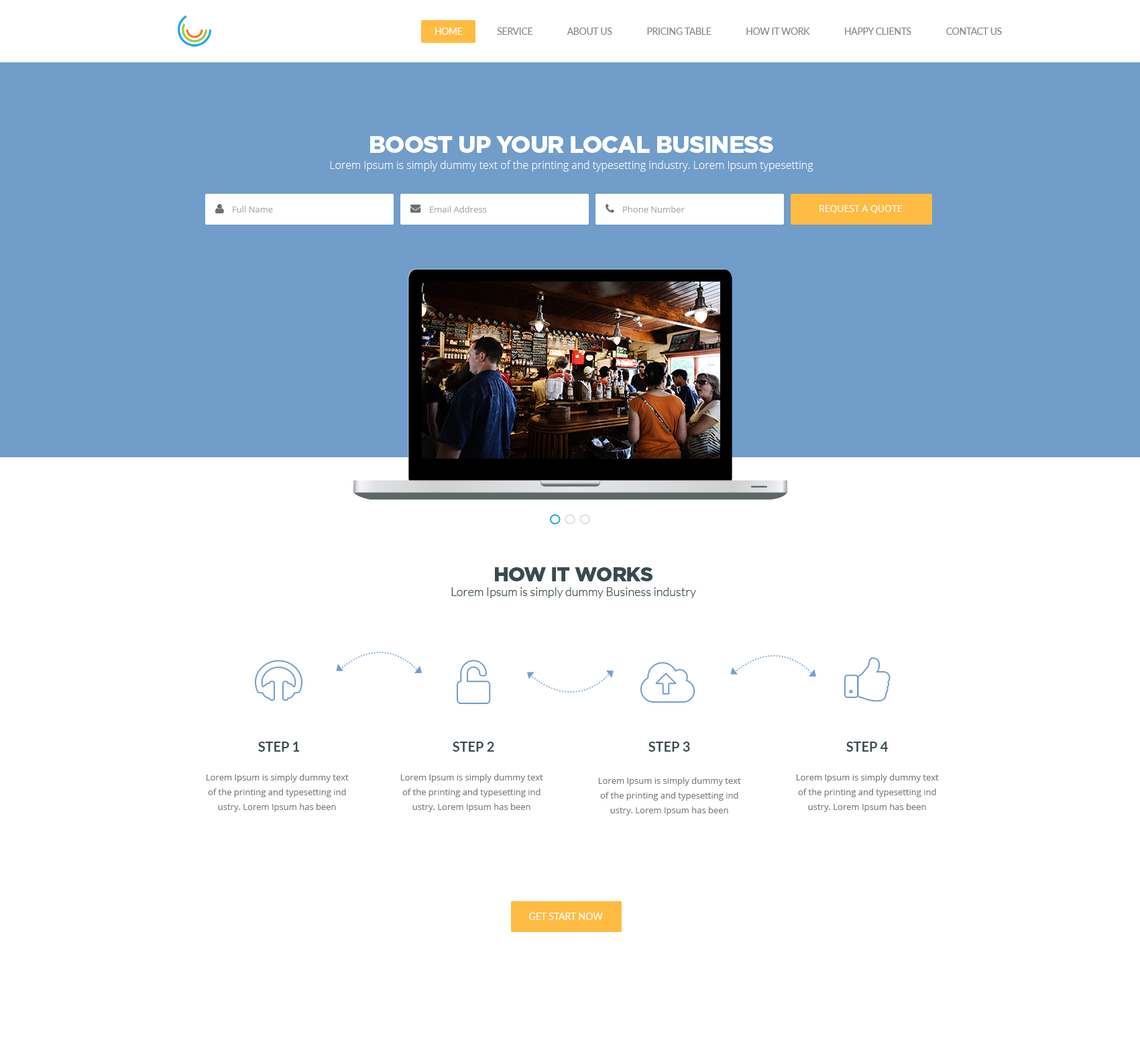
<style>
.page{position:relative;width:1140px;height:1046px;background:#ffffff}
.page>*{position:absolute;margin:0}
.t1{font:9.1px "Lato-Regular";color:#868686;text-transform:uppercase}
.t2{font:9.1px "Lato-Regular";color:#ffffff;text-transform:uppercase}
.t3{font:10.7px/16.1px "OpenSans-Light";color:#ffffff}
.t4{font:23.5px/16.1px "Gotham-Black";letter-spacing:-0.025em;color:#ffffff;text-transform:uppercase}
.t5{font:8.7px "OpenSans";color:#a9a9a9}
.t6{font:9.4px "OpenSans";color:#ffffff;text-transform:uppercase}
.t7{font:12.1px/14.8px "Lato-Light";color:#394b50}
.t8{font:20.1px/14.8px "Gotham-Black";letter-spacing:-0.025em;color:#394b50;text-transform:uppercase}
.t9{font:13.4px "Lato-Bold";color:#394b50;text-transform:uppercase}
.t10{font:8.7px/14.8px "OpenSans";color:#7b7b7b}
.t11{font:9.4px "Lato-Regular";color:#ffffff;text-transform:uppercase}
</style>
<div class="page">
<p class="t1" style="left:435px;top:27px;width:567px;height:8px"><span class="t2">Home  </span>             Service               About us               Pricing Table               How it work               Happy Clients               Contact Us</p>
<p class="t3" style="left:330px;top:136px;width:483px;height:36px;text-align:center"><span class="t4">Boost up your Local business<br></span>Lorem Ipsum is simply dummy text of the printing and typesetting industry. Lorem Ipsum typesetting</p>
<p class="t5" style="left:233px;top:206px;width:40px;height:7px">Full Name</p>
<p class="t5" style="left:430px;top:206px;width:57px;height:7px">Email Address</p>
<p class="t5" style="left:623px;top:206px;width:62px;height:7px">Phone Number</p>
<p class="t6" style="left:819px;top:205px;width:83px;height:8px">Request a quote</p>
<p class="t7" style="left:451px;top:567px;width:245px;height:31px;text-align:center"><span class="t8">How it works<br></span>Lorem Ipsum is simply dummy Business industry</p>
<p class="t9" style="left:258px;top:742px;width:42px;height:10px">Step 1</p>
<p class="t9" style="left:453px;top:742px;width:41px;height:10px">Step 2</p>
<p class="t9" style="left:648px;top:742px;width:42px;height:10px">Step 3</p>
<p class="t9" style="left:846px;top:742px;width:42px;height:10px">Step 4</p>
<p class="t10" style="left:206px;top:774px;width:143px;height:38px;text-align:center">Lorem Ipsum is simply dummy text of the printing and typesetting ind<br>ustry. Lorem Ipsum has been</p>
<p class="t10" style="left:400px;top:774px;width:143px;height:38px;text-align:center">Lorem Ipsum is simply dummy text of the printing and typesetting ind<br>ustry. Lorem Ipsum has been</p>
<p class="t10" style="left:796px;top:774px;width:143px;height:38px;text-align:center">Lorem Ipsum is simply dummy text of the printing and typesetting ind<br>ustry. Lorem Ipsum has been</p>
<p class="t10" style="left:598px;top:777px;width:143px;height:38px;text-align:center">Lorem Ipsum is simply dummy text of the printing and typesetting ind<br>ustry. Lorem Ipsum has been</p>
<p class="t11" style="left:529px;top:913px;width:74px;height:7px">Get start Now</p>
</div>
